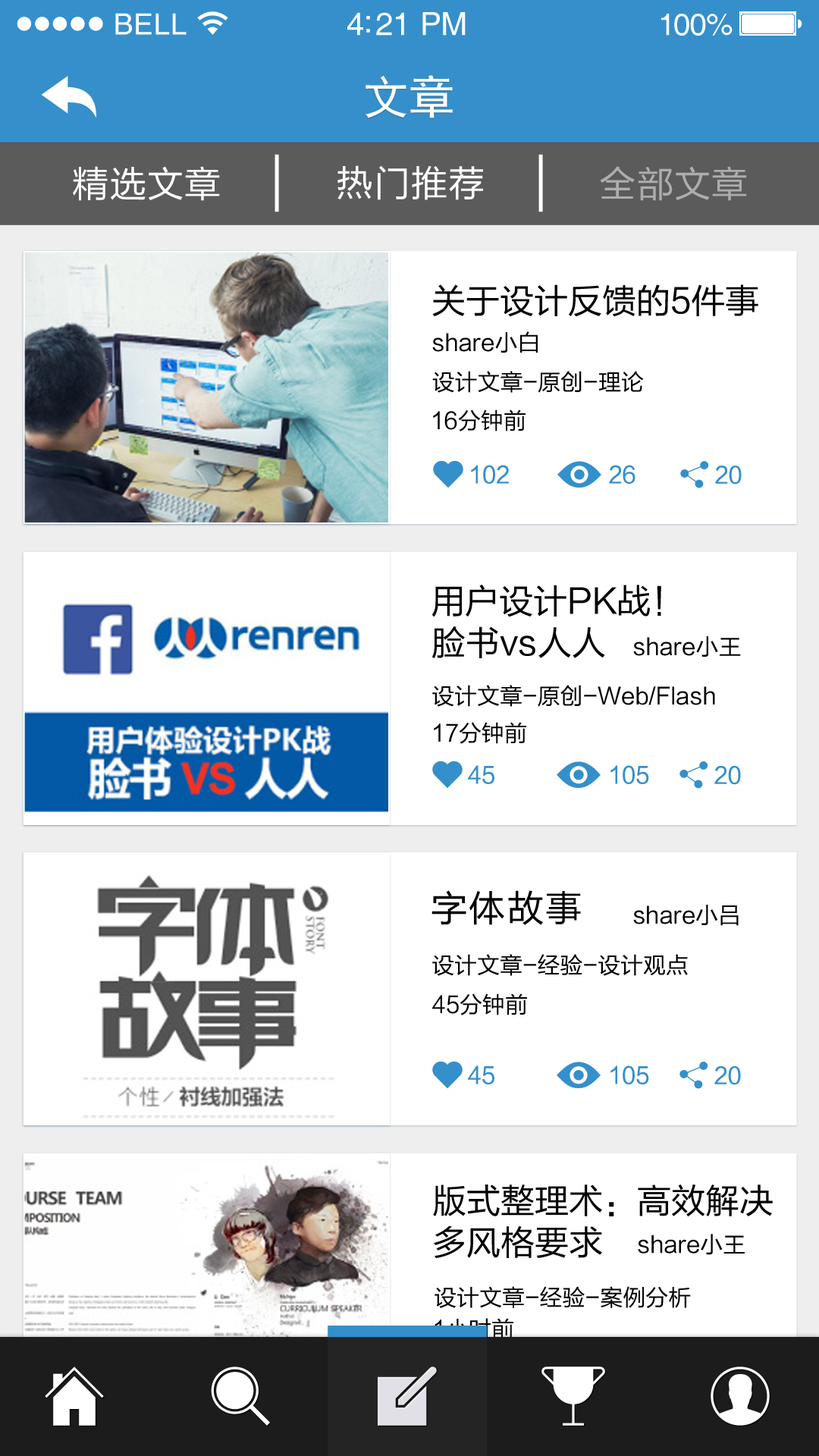
<style>
.page{position:relative;width:819px;height:1456px;background:#ffffff}
.page>*{position:absolute;margin:0}
.t1{font:29.3px "Helvetica";letter-spacing:0.02em;color:#ffffff}
.t2{font:31.8px "Helvetica";letter-spacing:-0.02em;color:#ffffff}
.t3{font:30.6px "Helvetica";letter-spacing:-0.02em;color:#ffffff}
.t4{font:45.5px "SimHei";color:#ffffff}
.t5{font:36.4px "FZLTHJW--GB1-0";letter-spacing:0.025em;color:#ffffff}
.t6{font:36.4px "FZLTHJW--GB1-0";letter-spacing:0.025em;color:#adadad}
.t7{font:34.1px "FZLTHJW--GB1-0";color:#010000}
.t8{font:22.7px "FZLTHJW--GB1-0";color:#000000}
.t9{font:22.7px "FZLTHJW--GB1-0";color:#358fcb}
.t10{font:34.1px "FZLTHJW--GB1-0";color:#000000}
.t11{font:36.4px "FZLTHJW--GB1-0";letter-spacing:0.05em;color:#000000}
.t12{font:34.1px/41.7px "FZLTHJW--GB1-0";color:#000000}
.t13{font:22.7px "FZLTHJW--GB1-0"}
</style>
<div class="page">
<p class="t1" style="left:115px;top:13px;width:72px;height:22px">BELL</p>
<p class="t2" style="left:347px;top:12px;width:119px;height:24px">4:21 PM</p>
<p class="t3" style="left:661px;top:14px;width:72px;height:22px">100%</p>
<p class="t4" style="left:366px;top:75px;width:87px;height:43px">文章</p>
<p class="t5" style="left:73px;top:166px;width:147px;height:35px">精选文章</p>
<p class="t5" style="left:337px;top:165px;width:146px;height:35px">热门推荐</p>
<p class="t6" style="left:600px;top:166px;width:147px;height:35px">全部文章</p>
<p class="t7" style="left:432px;top:284px;width:326px;height:33px">关于设计反馈的5件事</p>
<p class="t8" style="left:432px;top:331px;width:106px;height:22px">share小白</p>
<p class="t8" style="left:432px;top:371px;width:212px;height:22px">设计文章-原创-理论</p>
<p class="t8" style="left:433px;top:409px;width:93px;height:22px">16分钟前</p>
<p class="t9" style="left:471px;top:465px;width:38px;height:19px">102</p>
<p class="t9" style="left:609px;top:465px;width:26px;height:19px">26</p>
<p class="t9" style="left:715px;top:466px;width:27px;height:19px">20</p>
<p class="t10" style="left:431px;top:585px;width:230px;height:32px">用户设计PK战！</p>
<p class="t10" style="left:432px;top:626px;width:173px;height:32px">脸书vs人人</p>
<p class="t8" style="left:633px;top:636px;width:108px;height:21px">share小王</p>
<p class="t8" style="left:432px;top:685px;width:283px;height:22px">设计文章-原创-Web/Flash</p>
<p class="t8" style="left:434px;top:722px;width:92px;height:22px">17分钟前</p>
<p class="t9" style="left:468px;top:765px;width:26px;height:19px">45</p>
<p class="t9" style="left:610px;top:765px;width:39px;height:19px">105</p>
<p class="t9" style="left:714px;top:766px;width:27px;height:19px">20</p>
<p class="t11" style="left:431px;top:890px;width:150px;height:35px">字体故事</p>
<p class="t8" style="left:633px;top:905px;width:106px;height:21px">share小吕</p>
<p class="t8" style="left:432px;top:954px;width:256px;height:22px">设计文章-经验-设计观点</p>
<p class="t8" style="left:432px;top:993px;width:95px;height:22px">45分钟前</p>
<p class="t9" style="left:468px;top:1065px;width:26px;height:19px">45</p>
<p class="t9" style="left:610px;top:1065px;width:39px;height:19px">105</p>
<p class="t9" style="left:714px;top:1066px;width:27px;height:19px">20</p>
<p class="t12" style="left:433px;top:1185px;width:340px;height:73px">版式整理术：高效解决<br>多风格要求</p>
<p class="t8" style="left:638px;top:1234px;width:107px;height:21px">share小王</p>
<p class="t8" style="left:435px;top:1286px;width:256px;height:22px">设计文章-经验-案例分析</p>
<p class="t13" style="left:435px;top:1318px;width:78px;height:22px">1小时前</p>
</div>
